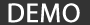
<style>
.page{position:relative;width:90px;height:25px;background:#333333}
.page>*{position:absolute;margin:0}
.t1{font:27px "MyriadPro-Regular";color:#ffffff;font-weight:bold}
</style>
<div class="page">
<p class="t1" style="left:8px;top:3px;width:72px;height:20px">DEMO</p>
</div>
